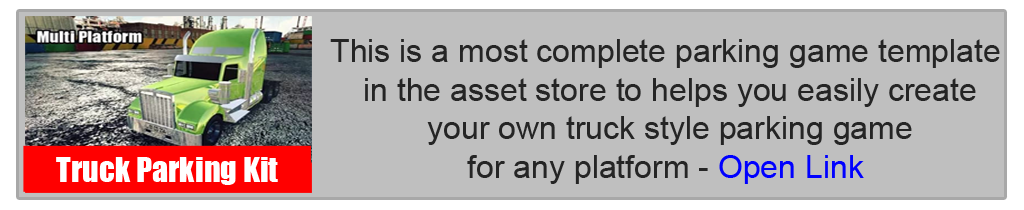
<style>
.page{position:relative;width:1024px;height:210px;background:#bfbfbf}
.page>*{position:absolute;margin:0}
.t1{font:32px "ArialMT";color:#252525}
.t2{font:32px "ArialMT";color:#0000ff}
.t3{font:32px "Impact";color:#ffffff}
</style>
<div class="page">
<p class="t1" style="left:330px;top:39px;width:670px;height:145px;text-align:center">This is a most complete parking game template<br>in the asset store to helps you easily create <br>your own truck style parking game <br>for any platform - <span class="t2">Open Link</span></p>
<p class="t3" style="left:56px;top:157px;width:222px;height:28px">Truck Parking Kit</p>
</div>
